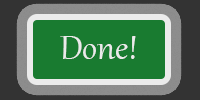
<style>
.page{position:relative;width:200px;height:100px;background:#197b30}
.page>*{position:absolute;margin:0}
.t1{font:41.7px "Gabriola";color:#ebebeb}
</style>
<div class="page">
<p class="t1" style="left:60px;top:36px;width:76px;height:23px">Done!</p>
</div>
